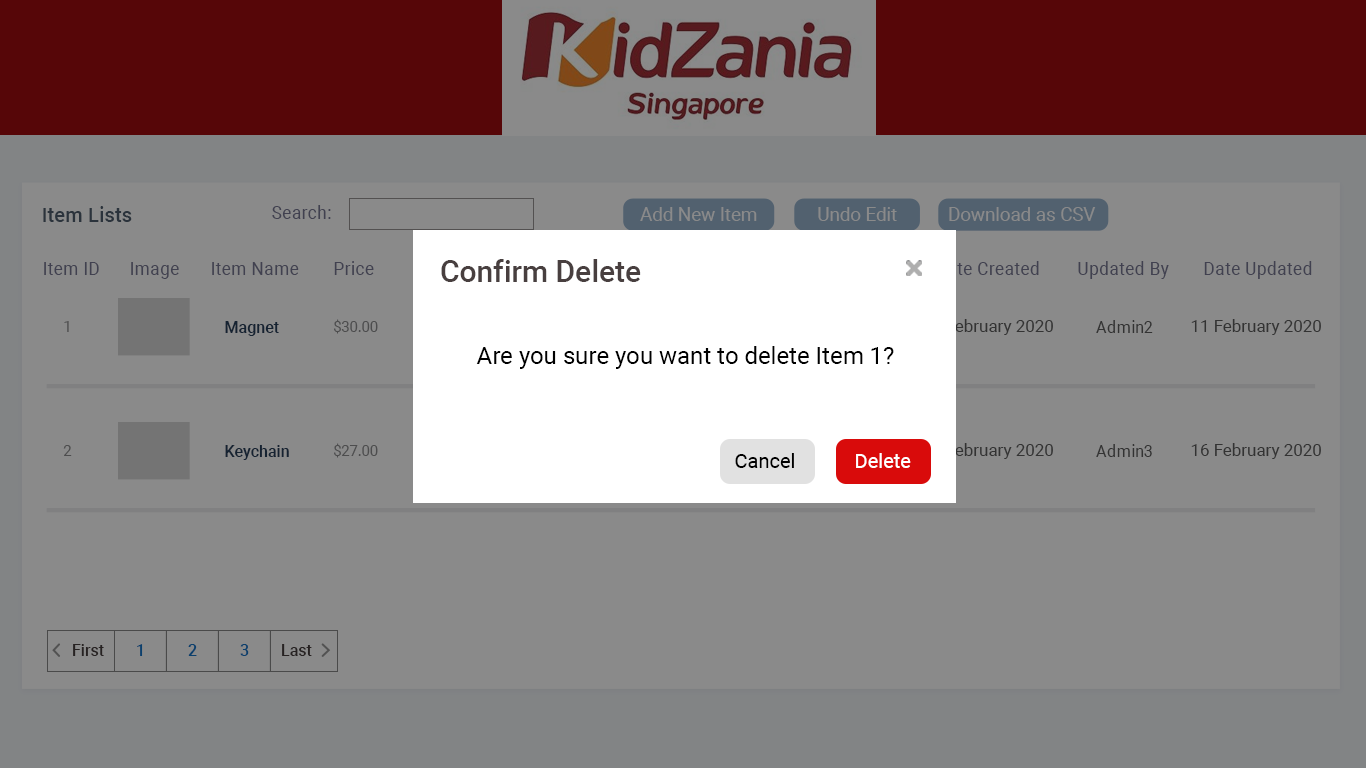
<style>
.page{position:relative;width:1366px;height:768px;background:#8a8a8a}
.page>*{position:absolute;margin:0}
.t1{font:20.4px "Roboto-Medium";color:#2b333c}
.t2{font:17.5px "Roboto-Regular";letter-spacing:0.017em;color:#414150}
.t3{font:18.7px "Roboto-Regular";color:#8a8a8a}
.t4{font:30px "Roboto-Medium";color:#483f3f}
.t5{font:14.6px "Roboto-Regular"}
.t6{font:16.1px "Roboto-Medium";color:#162332}
.t7{font:14.6px "Roboto-Regular";color:#4d4d4e}
.t8{font:16.8px "Roboto-Regular";letter-spacing:0.005em;color:#333333}
.t9{font:16.8px "Roboto-Regular";color:#333333}
.t10{font:24px "Roboto-Regular";color:#000000}
.t11{font:20px "Roboto-Regular";color:#000000}
.t12{font:20px "Roboto-Regular";color:#ffffff}
.t13{font:16px "Roboto-Medium";color:#272222}
.t14{font:16px "Roboto-Medium";color:#0b406d}
</style>
<div class="page">
<p class="t1" style="left:43px;top:206px;width:89px;height:16px">Item Lists</p>
<p class="t2" style="left:272px;top:205px;width:59px;height:14px">Search:</p>
<p class="t3" style="left:640px;top:207px;width:456px;height:14px">Add New Item             Undo Edit           Download as CSV</p>
<p class="t2" style="left:44px;top:262px;width:55px;height:13px">Item ID</p>
<p class="t2" style="left:131px;top:262px;width:48px;height:17px">Image</p>
<p class="t2" style="left:212px;top:262px;width:87px;height:13px">Item Name</p>
<p class="t2" style="left:334px;top:261px;width:40px;height:14px">Price</p>
<p class="t4" style="left:441px;top:259px;width:200px;height:23px">Confirm Delete</p>
<p class="t2" style="left:1078px;top:261px;width:91px;height:18px">Updated By</p>
<p class="t2" style="left:1204px;top:261px;width:108px;height:18px">Date Updated</p>
<p class="t5" style="left:64px;top:321px;width:5px;height:11px">1</p>
<p class="t6" style="left:225px;top:321px;width:54px;height:15px">Magnet</p>
<p class="t7" style="left:334px;top:319px;width:44px;height:15px">$30.00</p>
<p class="t8" style="left:923px;top:319px;width:130px;height:16px">10 February 2020</p>
<p class="t9" style="left:1096px;top:320px;width:57px;height:13px">Admin2</p>
<p class="t8" style="left:1191px;top:319px;width:130px;height:16px">11 February 2020</p>
<p class="t10" style="left:476px;top:346px;width:418px;height:23px">Are you sure you want to delete Item 1?</p>
<p class="t7" style="left:63px;top:445px;width:9px;height:11px">2</p>
<p class="t6" style="left:225px;top:445px;width:64px;height:15px">Keychain</p>
<p class="t7" style="left:334px;top:443px;width:44px;height:15px">$27.00</p>
<p class="t8" style="left:923px;top:443px;width:130px;height:16px">14 February 2020</p>
<p class="t9" style="left:1096px;top:444px;width:56px;height:13px">Admin3</p>
<p class="t8" style="left:1191px;top:443px;width:130px;height:16px">16 February 2020</p>
<p class="t11" style="left:735px;top:453px;width:59px;height:15px">Cancel</p>
<p class="t12" style="left:856px;top:453px;width:55px;height:15px">Delete</p>
<p class="t13" style="left:73px;top:644px;width:31px;height:12px">First</p>
<p class="t14" style="left:137px;top:644px;width:6px;height:12px">1</p>
<p class="t14" style="left:188px;top:644px;width:9px;height:12px">2</p>
<p class="t14" style="left:240px;top:644px;width:9px;height:12px">3</p>
<p class="t13" style="left:282px;top:644px;width:30px;height:12px">Last</p>
</div>
